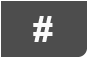
<style>
.page{position:relative;width:90px;height:60px;background:#4d4d4d}
.page>*{position:absolute;margin:0}
.t1{font:36px "Arial-BoldMT";color:#fafafa}
</style>
<div class="page">
<p class="t1" style="left:33px;top:16px;width:20px;height:26px">#</p>
</div>
